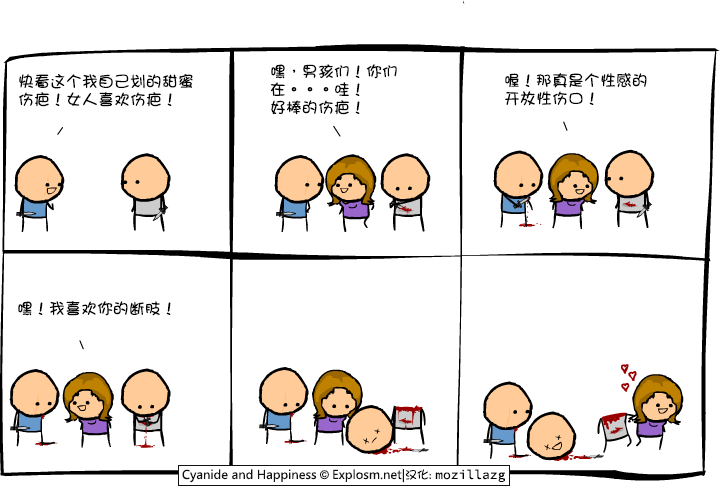
<style>
.page{position:relative;width:720px;height:490px;background:#ffffff}
.page>*{position:absolute;margin:0}
.t1{font:16px/18px "DFGirl";color:#000000}
.t2{font:16px "DFGirl";color:#000000}
</style>
<div class="page">
<p class="t1" style="left:270px;top:64px;width:127px;height:51px">嘿，男孩们！你们<br>在。。。哇！<br>好棒的伤疤！</p>
<p class="t1" style="left:19px;top:74px;width:174px;height:33px">快看这个我自己划的甜蜜<br>伤疤！女人喜欢伤疤！</p>
<p class="t1" style="left:505px;top:72px;width:142px;height:34px">喔！那真是个性感的<br>开放性伤口！</p>
<p class="t2" style="left:18px;top:301px;width:153px;height:15px">嘿！我喜欢你的断肢！</p>
</div>
